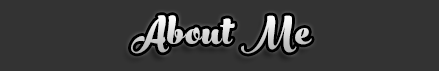
<style>
.page{position:relative;width:439px;height:71px;background:#333333}
.page>*{position:absolute;margin:0}
.t1{font:60px "PeachesandCream-Bold";letter-spacing:0.025em}
</style>
<div class="page">
<p class="t1" style="left:131px;top:15px;width:181px;height:39px">About Me</p>
</div>
